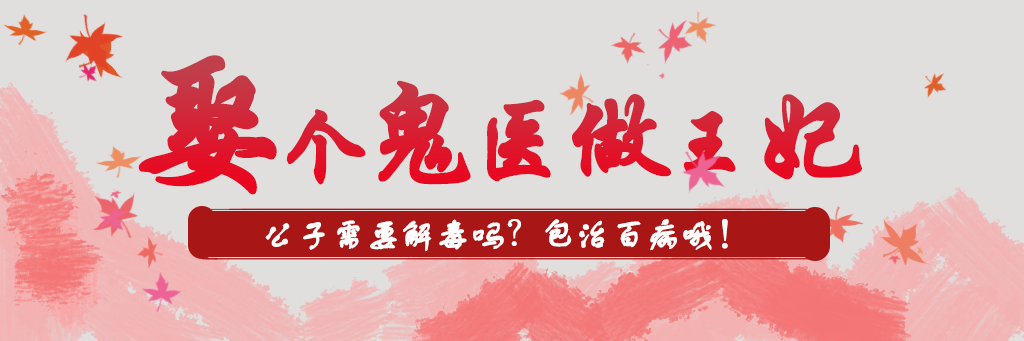
<style>
.page{position:relative;width:1024px;height:341px;background:#e1dede}
.page>*{position:absolute;margin:0}
.t1{font:160px "STXingkai";letter-spacing:-0.1em;color:#db1a2f;font-weight:bold}
.t2{font:90px "STXingkai";letter-spacing:-0.1em;color:#db1a2f;font-weight:bold}
.t3{font:120px "STXingkai";letter-spacing:-0.1em;color:#db1a2f;font-weight:bold}
.t4{font:100px "STXingkai";letter-spacing:-0.1em;color:#db1a2f;font-weight:bold}
.t5{font:110px "STXingkai";letter-spacing:-0.1em;color:#db1a2f;font-weight:bold}
.t6{font:35px "FZSTK--GBK1-0";letter-spacing:-0.025em;color:#ffffff;font-weight:bold}
</style>
<div class="page">
<p class="t1" style="left:138px;top:55px;width:724px;height:140px">娶<span class="t2">个</span><span class="t3">鬼</span><span class="t4">医</span><span class="t5">做</span><span class="t2">王</span><span class="t3">妃</span></p>
<p class="t6" style="left:265px;top:219px;width:463px;height:33px">公子需要解毒吗？包治百病哦！</p>
</div>
